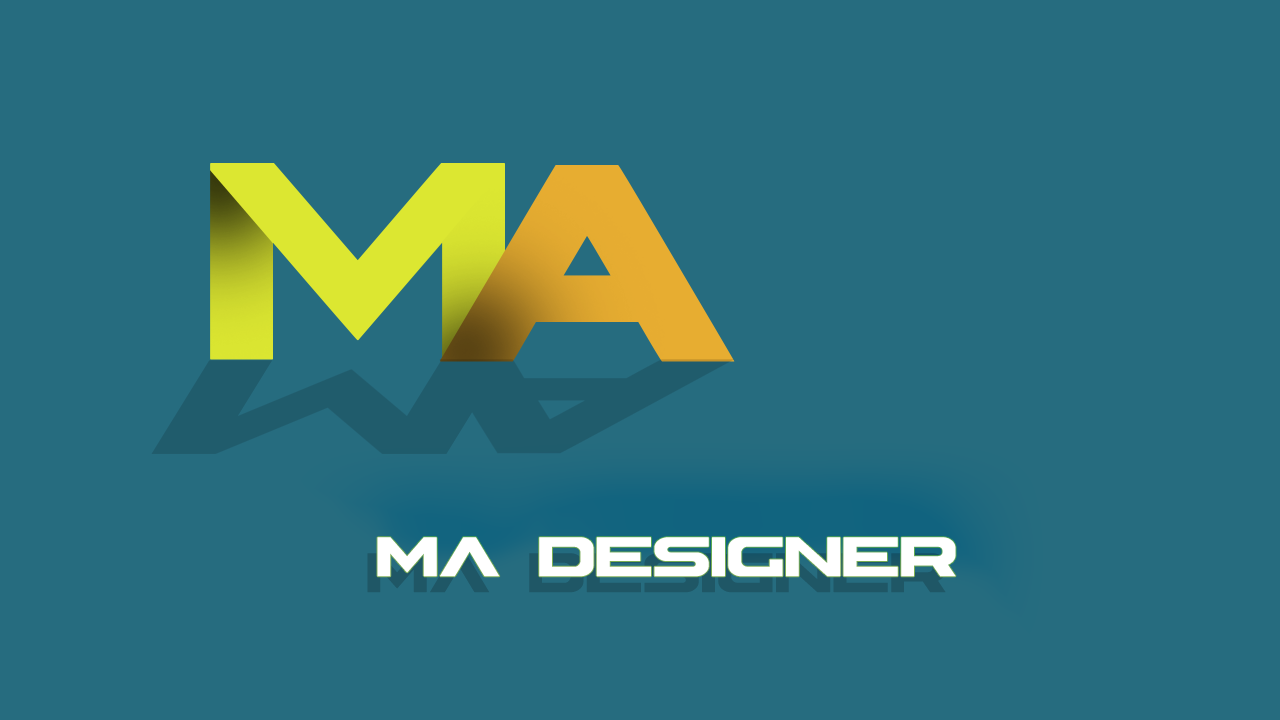
<style>
.page{position:relative;width:1280px;height:720px;background:#266c7f}
.page>*{position:absolute;margin:0}
.t1{font:73.8px "ASTERA";color:#ffffff}
</style>
<div class="page">
<p class="t1" style="left:377px;top:537px;width:579px;height:40px">MA designer</p>
</div>
